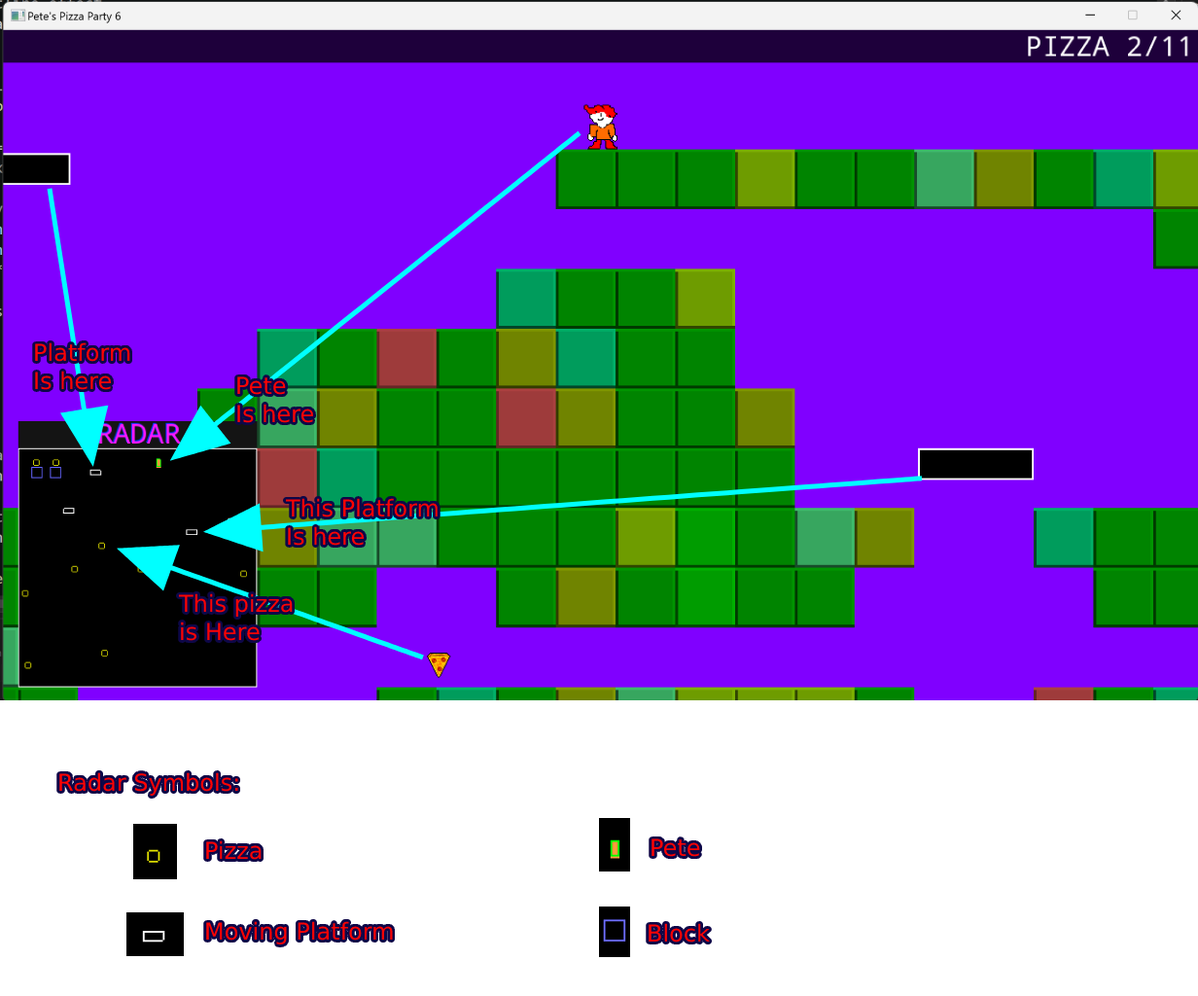
<style>
.page{position:relative;width:1198px;height:996px;background:#8000ff}
.page>*{position:absolute;margin:0}
.t1{font:23.3px "DejaVuSans";color:#fd0303}
</style>
<div class="page">
<p class="t1" style="left:35px;top:342px;width:95px;height:48px">Platform<br>Is here</p>
<p class="t1" style="left:237px;top:376px;width:77px;height:47px">Pete<br>Is here</p>
<p class="t1" style="left:285px;top:498px;width:152px;height:47px">This Platform<br>Is here</p>
<p class="t1" style="left:178px;top:593px;width:115px;height:48px">This pizza<br>is Here</p>
<p class="t1" style="left:59px;top:772px;width:179px;height:23px">Radar Symbols:</p>
<p class="t1" style="left:206px;top:840px;width:56px;height:19px">Pizza</p>
<p class="t1" style="left:651px;top:838px;width:49px;height:19px">Pete</p>
<p class="t1" style="left:206px;top:921px;width:187px;height:23px">Moving Platform</p>
<p class="t1" style="left:648px;top:923px;width:62px;height:19px">Block</p>
</div>
